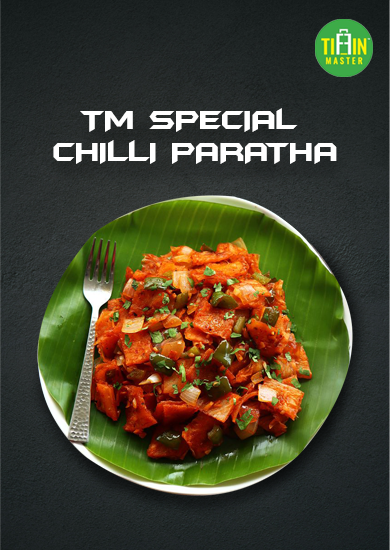
<style>
.page{position:relative;width:390px;height:550px}
.page>*{position:absolute;margin:0}
.t1{font:30.4px/31.7px "BatmanForeverAlternate";letter-spacing:-0.04em;color:#ffffff}
</style>
<div class="page">
<p class="t1" style="left:53px;top:108px;width:284px;height:56px;text-align:center">TM SPECIAL <br>CHILLI PARATHA</p>
</div>
